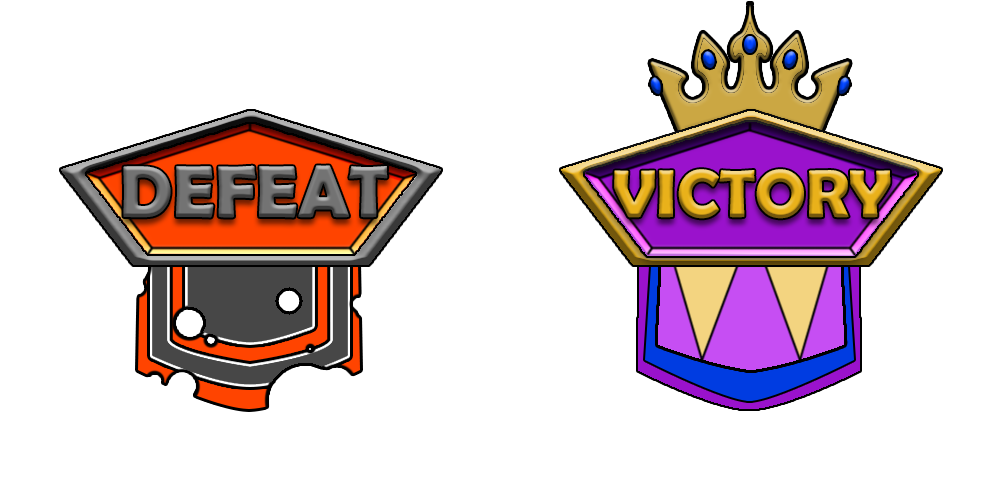
<style>
.page{position:relative;width:1000px;height:500px;background:#ffffff}
.page>*{position:absolute;margin:0}
.t1{font:74px "BerlinSansFBDemi-Bold";color:#737373}
.t2{font:68px "BerlinSansFBDemi-Bold"}
</style>
<div class="page">
<p class="t1" style="left:123px;top:165px;width:265px;height:53px">DEFEAT</p>
<p class="t2" style="left:614px;top:169px;width:277px;height:50px">VICTORY</p>
</div>
